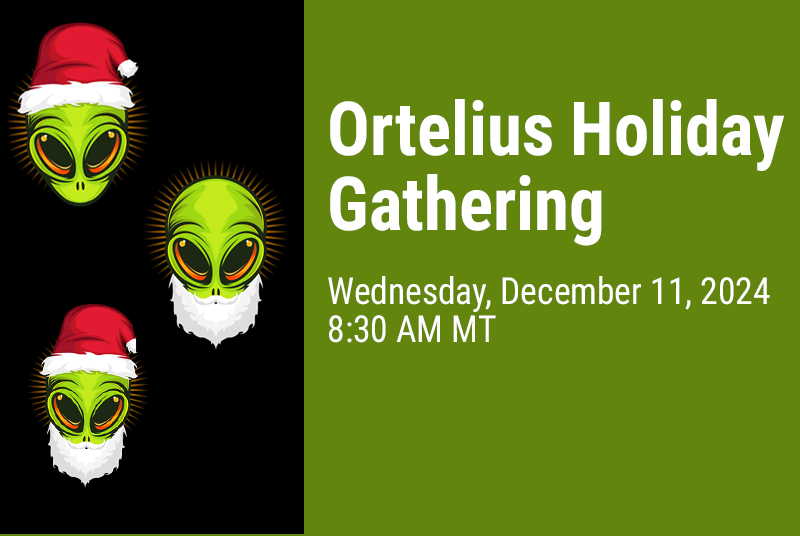
<style>
.page{position:relative;width:800px;height:536px;background:#62850e}
.page>*{position:absolute;margin:0}
.t1{font:37.3px/37.3px "RobotoCondensed-Regular";color:#ffffff;scale:0.95 1}
.t2{font:74.6px/74.6px "RobotoCondensed-Bold";color:#ffffff;scale:0.95 1}
</style>
<div class="page">
<p class="t1" style="left:328px;top:99px;width:456px;height:244px"><span class="t2">Ortelius Holiday<br>Gathering<br><br></span>Wednesday, December 11, 2024<br>8:30 AM MT</p>
</div>
